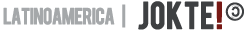
<style>
.page{position:relative;width:250px;height:30px;background:#ffffff}
.page>*{position:absolute;margin:0}
.t1{font:18px "Bebas";letter-spacing:-0.05em;color:#a5a8aa;font-weight:bold}
.t2{font:30px "Bebas";color:#3e4042;font-weight:bold}
.t3{font:30px "Bebas";letter-spacing:0.025em;color:#3e4042;font-weight:bold}
.t4{font:30px "Bebas";letter-spacing:0.025em;color:#771915;font-weight:bold}
.t5{font:18px "ArialMT";letter-spacing:-0.05em;color:#3e4042;font-weight:bold;scale:0.89 1}
</style>
<div class="page">
<p class="t1" style="left:122px;top:4px;width:4px;height:24px">|</p>
<p class="t2" style="left:138px;top:1px;width:84px;height:29px">jokt<span class="t3">e</span><span class="t4">!</span></p>
<p class="t5" style="left:231px;top:6px;width:9px;height:11px;rotate:180deg">c</p>
<p class="t1" style="left:3px;top:7px;width:112px;height:18px">LatinoAmerica</p>
</div>
